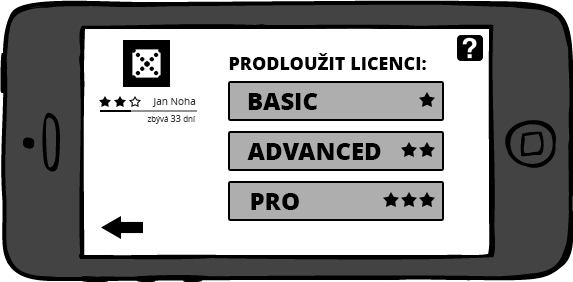
<style>
.page{position:relative;width:573px;height:282px;background:#ffffff}
.page>*{position:absolute;margin:0}
.t1{font:18px "OpenSans-Extrabold";color:#000000;text-transform:uppercase}
.t2{font:10px "OpenSans";color:#333333}
.t3{font:24px "OpenSans-Extrabold";color:#000000;text-transform:uppercase}
.t4{font:8px "OpenSans";color:#333333}
.t5{font:9px "OpenSans";color:#333333}
</style>
<div class="page">
<p class="t1" style="left:229px;top:53px;width:197px;height:17px">Prodloužit licenci:</p>
<p class="t2" style="left:152px;top:98px;width:44px;height:9px">Jan Noha</p>
<p class="t3" style="left:248px;top:93px;width:70px;height:17px">BASIC</p>
<p class="t4" style="left:147px;top:115px;width:49px;height:9px">zbývá <span class="t5">33 </span>dní</p>
<p class="t3" style="left:247px;top:143px;width:134px;height:17px">Advanced</p>
<p class="t3" style="left:251px;top:193px;width:48px;height:17px">Pro</p>
</div>
